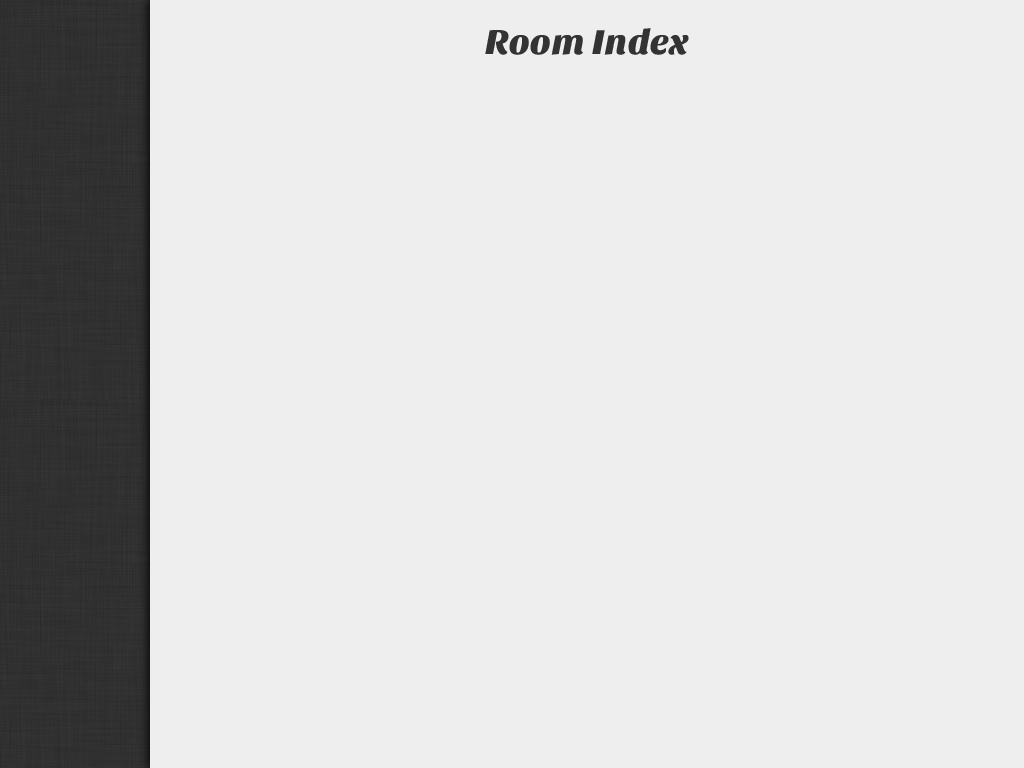
<style>
.page{position:relative;width:1024px;height:768px;background:#eeeeee}
.page>*{position:absolute;margin:0}
.t1{font:36px "SansitaOne";color:#333333}
</style>
<div class="page">
<p class="t1" style="left:485px;top:28px;width:204px;height:27px">Room Index</p>
</div>
